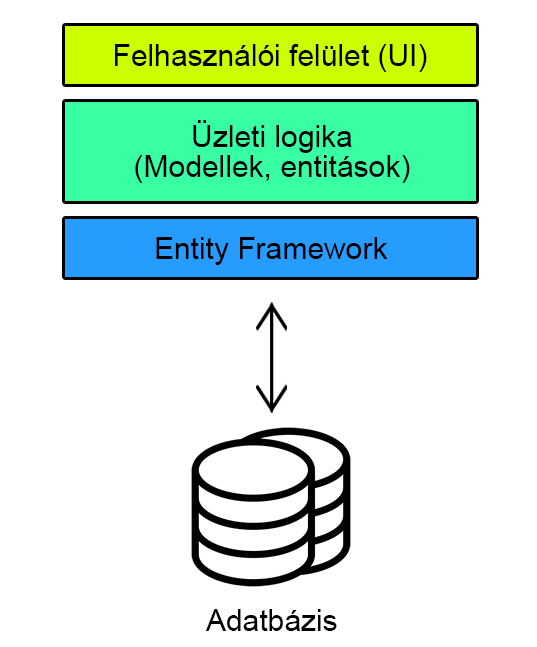
<style>
.page{position:relative;width:537px;height:647px;background:#ffffff}
.page>*{position:absolute;margin:0}
.t1{font:30px "ArialMT";color:#000000}
.t2{font:30px/30px "ArialMT";color:#000000}
</style>
<div class="page">
<p class="t1" style="left:115px;top:44px;width:312px;height:28px">Felhasználói felület (UI)</p>
<p class="t2" style="left:135px;top:120px;width:275px;height:63px;text-align:center">Üzleti logika<br>(Modellek, entitások)</p>
<p class="t1" style="left:156px;top:237px;width:232px;height:28px">Entity Framework</p>
<p class="t1" style="left:205px;top:609px;width:132px;height:22px">Adatbázis</p>
</div>
